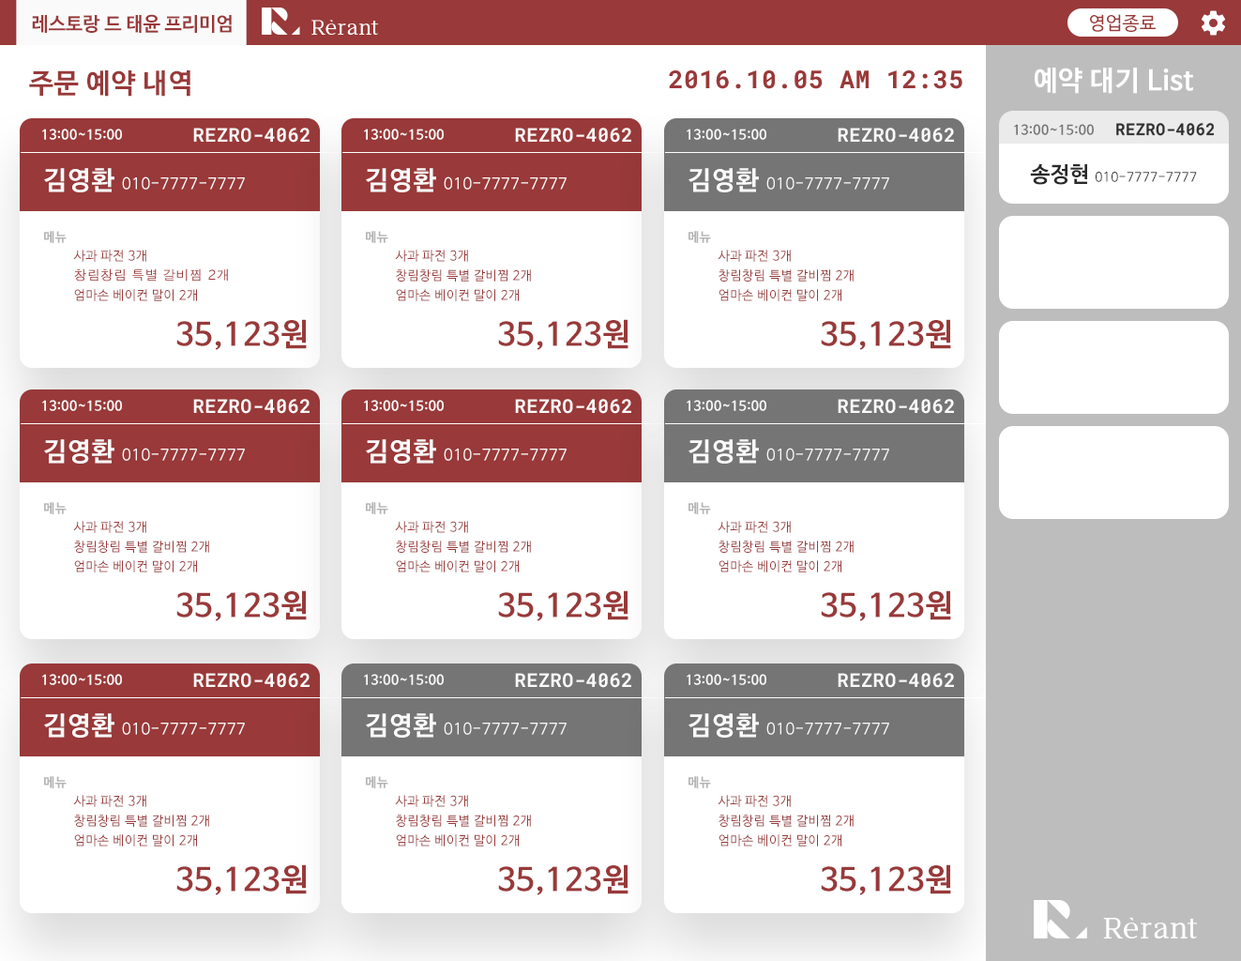
<style>
.page{position:relative;width:1241px;height:961px;background:#ffffff}
.page>*{position:absolute;margin:0}
.t1{font:19.3px "NanumBarunGothicBold";color:#993939}
.t2{font:18.4px "NanumBarunGothic";letter-spacing:0.025em;color:#993939}
.t3{font:27.4px "NanumBarunGothicBold";letter-spacing:0.025em;color:#993939}
.t4{font:24.9px "RobotoMono-Bold";letter-spacing:0.025em;color:#993939}
.t5{font:27.4px "NanumBarunGothicBold";letter-spacing:0.025em;color:#ffffff}
.t6{font:13.1px "NanumBarunGothicBold";letter-spacing:0.025em;color:#757575}
.t7{font:0px "NanumBarunGothicBold";letter-spacing:0.025em;color:#757575}
.t8{font:16px "RobotoMono-Bold";letter-spacing:0.025em;color:#2d2c2c}
.t9{font:13.1px "NanumBarunGothicBold";letter-spacing:0.025em;color:#fafafa}
.t10{font:0px "NanumBarunGothicBold";letter-spacing:0.025em;color:#fafafa}
.t11{font:18.9px "RobotoMono-Bold";letter-spacing:0.025em;color:#fafafa}
.t12{font:15.7px "NanumBarunGothic";letter-spacing:0.025em;color:#fafafa}
.t13{font:26.1px "NanumBarunGothicBold";letter-spacing:0.025em;color:#fafafa}
.t14{font:12.9px "NanumBarunGothic";letter-spacing:0.025em;color:#2a2a2a}
.t15{font:21.5px "NanumBarunGothicBold";letter-spacing:0.025em;color:#2a2a2a}
.t16{font:12.9px "NanumBarunGothicBold";letter-spacing:0.025em;color:#b4b4b4}
.t17{font:13px "NanumBarunGothic";letter-spacing:0.025em;color:#993939}
.t18{font:31.3px "NanumBarunGothicBold";letter-spacing:0.025em;color:#993939}
</style>
<div class="page">
<p class="t1" style="left:32px;top:14px;width:200px;height:19px">레스토랑 드 태윤 프리미엄</p>
<p class="t2" style="left:1090px;top:14px;width:66px;height:18px">영업종료</p>
<p class="t3" style="left:29px;top:70px;width:161px;height:27px">주문 예약 내역</p>
<p class="t4" style="left:669px;top:70px;width:294px;height:19px">2016.10.05 AM 12:35</p>
<p class="t5" style="left:1035px;top:68px;width:158px;height:26px">예약 대기 List</p>
<p class="t6" style="left:1014px;top:124px;width:80px;height:11px"><span class="t7">1</span>13:00~15:00</p>
<p class="t8" style="left:1116px;top:123px;width:98px;height:13px">REZRO-4062</p>
<p class="t9" style="left:42px;top:129px;width:80px;height:11px"><span class="t10">1</span>13:00~15:00</p>
<p class="t11" style="left:193px;top:128px;width:117px;height:15px">REZRO-4062</p>
<p class="t9" style="left:364px;top:129px;width:80px;height:11px"><span class="t10">1</span>13:00~15:00</p>
<p class="t11" style="left:515px;top:128px;width:116px;height:15px">REZRO-4062</p>
<p class="t9" style="left:687px;top:129px;width:79px;height:11px"><span class="t10">1</span>13:00~15:00</p>
<p class="t11" style="left:838px;top:128px;width:116px;height:15px">REZRO-4062</p>
<p class="t12" style="left:44px;top:168px;width:201px;height:24px"><span class="t13">김영환 </span>010-7777-7777</p>
<p class="t12" style="left:366px;top:168px;width:201px;height:24px"><span class="t13">김영환 </span>010-7777-7777</p>
<p class="t12" style="left:689px;top:168px;width:200px;height:24px"><span class="t13">김영환 </span>010-7777-7777</p>
<p class="t14" style="left:1030px;top:164px;width:167px;height:21px"><span class="t15">송정현 </span>010-7777-7777</p>
<p class="t16" style="left:44px;top:231px;width:23px;height:12px">메뉴</p>
<p class="t16" style="left:366px;top:231px;width:22px;height:12px">메뉴</p>
<p class="t16" style="left:689px;top:231px;width:22px;height:12px">메뉴</p>
<p class="t17" style="left:73px;top:250px;width:73px;height:12px">사과 파전 3개</p>
<p class="t17" style="left:395px;top:250px;width:73px;height:12px">사과 파전 3개</p>
<p class="t17" style="left:718px;top:250px;width:73px;height:12px">사과 파전 3개</p>
<p class="t17" style="left:74px;top:268px;width:154px;height:13px">창림창림 특별 갈비찜 2개</p>
<p class="t17" style="left:396px;top:269px;width:135px;height:12px">창림창림 특별 갈비찜 2개</p>
<p class="t17" style="left:719px;top:269px;width:135px;height:12px">창림창림 특별 갈비찜 2개</p>
<p class="t17" style="left:74px;top:289px;width:123px;height:12px">엄마손 베이컨 말이 2개</p>
<p class="t17" style="left:396px;top:289px;width:123px;height:12px">엄마손 베이컨 말이 2개</p>
<p class="t17" style="left:719px;top:289px;width:123px;height:12px">엄마손 베이컨 말이 2개</p>
<p class="t18" style="left:176px;top:319px;width:131px;height:31px">35,123원</p>
<p class="t18" style="left:498px;top:319px;width:131px;height:31px">35,123원</p>
<p class="t18" style="left:821px;top:319px;width:130px;height:31px">35,123원</p>
<p class="t9" style="left:42px;top:400px;width:80px;height:11px"><span class="t10">1</span>13:00~15:00</p>
<p class="t11" style="left:193px;top:399px;width:117px;height:15px">REZRO-4062</p>
<p class="t9" style="left:364px;top:400px;width:80px;height:11px"><span class="t10">1</span>13:00~15:00</p>
<p class="t11" style="left:515px;top:399px;width:116px;height:15px">REZRO-4062</p>
<p class="t9" style="left:687px;top:400px;width:79px;height:11px"><span class="t10">1</span>13:00~15:00</p>
<p class="t11" style="left:838px;top:399px;width:116px;height:15px">REZRO-4062</p>
<p class="t12" style="left:44px;top:439px;width:201px;height:24px"><span class="t13">김영환 </span>010-7777-7777</p>
<p class="t12" style="left:366px;top:439px;width:201px;height:24px"><span class="t13">김영환 </span>010-7777-7777</p>
<p class="t12" style="left:689px;top:439px;width:200px;height:24px"><span class="t13">김영환 </span>010-7777-7777</p>
<p class="t16" style="left:44px;top:502px;width:23px;height:12px">메뉴</p>
<p class="t16" style="left:366px;top:502px;width:22px;height:12px">메뉴</p>
<p class="t16" style="left:689px;top:502px;width:22px;height:12px">메뉴</p>
<p class="t17" style="left:73px;top:521px;width:73px;height:12px">사과 파전 3개</p>
<p class="t17" style="left:395px;top:521px;width:73px;height:12px">사과 파전 3개</p>
<p class="t17" style="left:718px;top:521px;width:73px;height:12px">사과 파전 3개</p>
<p class="t17" style="left:74px;top:540px;width:135px;height:13px">창림창림 특별 갈비찜 2개</p>
<p class="t17" style="left:396px;top:540px;width:135px;height:13px">창림창림 특별 갈비찜 2개</p>
<p class="t17" style="left:719px;top:540px;width:135px;height:13px">창림창림 특별 갈비찜 2개</p>
<p class="t17" style="left:74px;top:560px;width:123px;height:12px">엄마손 베이컨 말이 2개</p>
<p class="t17" style="left:396px;top:560px;width:123px;height:12px">엄마손 베이컨 말이 2개</p>
<p class="t17" style="left:719px;top:560px;width:123px;height:12px">엄마손 베이컨 말이 2개</p>
<p class="t18" style="left:176px;top:590px;width:131px;height:31px">35,123원</p>
<p class="t18" style="left:498px;top:590px;width:131px;height:31px">35,123원</p>
<p class="t18" style="left:821px;top:590px;width:130px;height:31px">35,123원</p>
<p class="t9" style="left:42px;top:674px;width:80px;height:11px"><span class="t10">1</span>13:00~15:00</p>
<p class="t11" style="left:193px;top:673px;width:117px;height:15px">REZRO-4062</p>
<p class="t9" style="left:364px;top:674px;width:80px;height:11px"><span class="t10">1</span>13:00~15:00</p>
<p class="t11" style="left:515px;top:673px;width:116px;height:15px">REZRO-4062</p>
<p class="t9" style="left:687px;top:674px;width:79px;height:11px"><span class="t10">1</span>13:00~15:00</p>
<p class="t11" style="left:838px;top:673px;width:116px;height:15px">REZRO-4062</p>
<p class="t12" style="left:44px;top:713px;width:201px;height:24px"><span class="t13">김영환 </span>010-7777-7777</p>
<p class="t12" style="left:366px;top:713px;width:201px;height:24px"><span class="t13">김영환 </span>010-7777-7777</p>
<p class="t12" style="left:689px;top:713px;width:200px;height:24px"><span class="t13">김영환 </span>010-7777-7777</p>
<p class="t16" style="left:44px;top:776px;width:23px;height:12px">메뉴</p>
<p class="t16" style="left:366px;top:776px;width:22px;height:12px">메뉴</p>
<p class="t16" style="left:689px;top:776px;width:22px;height:12px">메뉴</p>
<p class="t17" style="left:73px;top:795px;width:73px;height:12px">사과 파전 3개</p>
<p class="t17" style="left:395px;top:795px;width:73px;height:12px">사과 파전 3개</p>
<p class="t17" style="left:718px;top:795px;width:73px;height:12px">사과 파전 3개</p>
<p class="t17" style="left:74px;top:814px;width:135px;height:13px">창림창림 특별 갈비찜 2개</p>
<p class="t17" style="left:396px;top:814px;width:135px;height:13px">창림창림 특별 갈비찜 2개</p>
<p class="t17" style="left:719px;top:814px;width:135px;height:13px">창림창림 특별 갈비찜 2개</p>
<p class="t17" style="left:74px;top:834px;width:123px;height:12px">엄마손 베이컨 말이 2개</p>
<p class="t17" style="left:396px;top:834px;width:123px;height:12px">엄마손 베이컨 말이 2개</p>
<p class="t17" style="left:719px;top:834px;width:123px;height:12px">엄마손 베이컨 말이 2개</p>
<p class="t18" style="left:176px;top:864px;width:131px;height:31px">35,123원</p>
<p class="t18" style="left:498px;top:864px;width:131px;height:31px">35,123원</p>
<p class="t18" style="left:821px;top:864px;width:130px;height:31px">35,123원</p>
</div>
